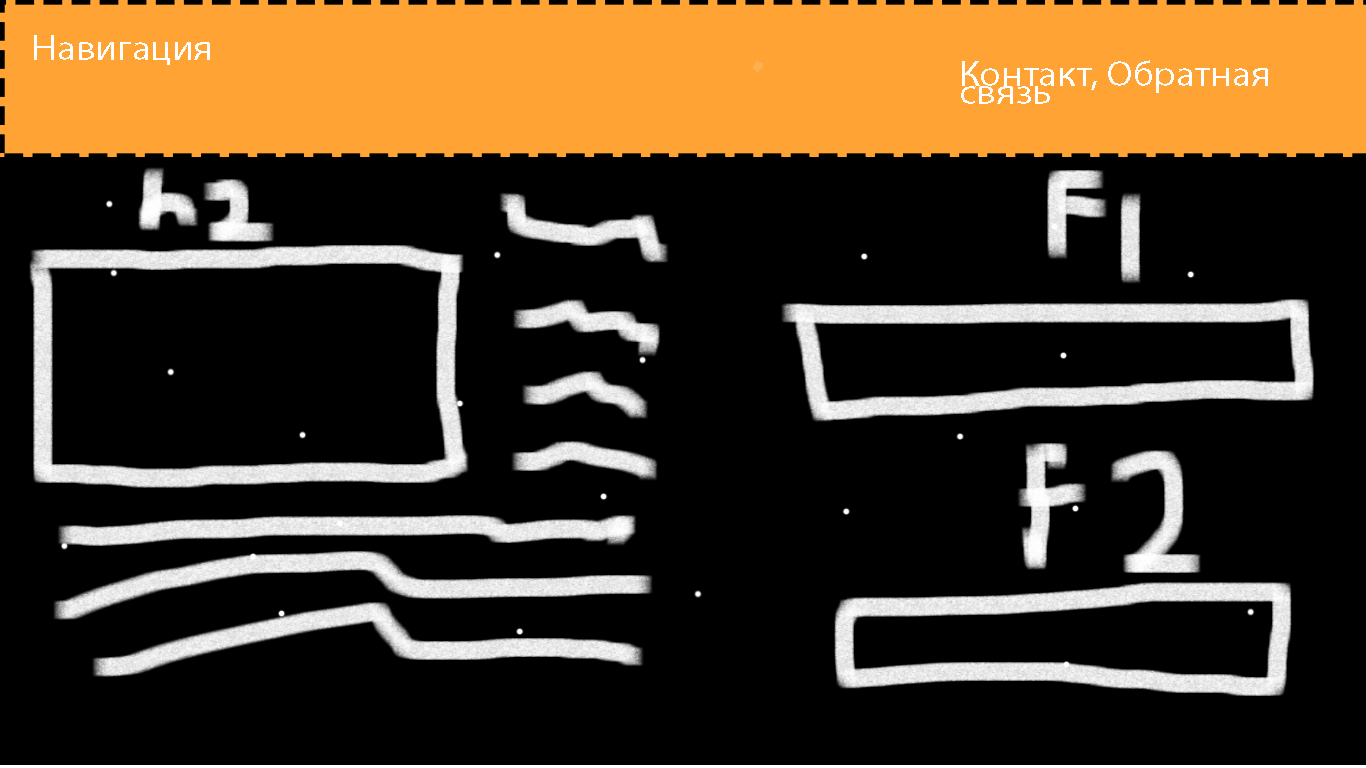
<style>
.page{position:relative;width:1366px;height:768px;background:#000000}
.page>*{position:absolute;margin:0}
.t1{font:36px "MyriadPro-Regular";color:#ffffff;scale:1.1 1}
</style>
<div class="page">
<p class="t1" style="left:34px;top:35px;width:176px;height:30px">Навигация</p>
<p class="t1" style="left:961px;top:60px;width:307px;height:44px">Контакт, Обратная связь</p>
</div>
